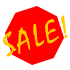
<style>
.page{position:relative;width:70px;height:70px;background:#ffffff}
.page>*{position:absolute;margin:0}
.t1{font:32px "Mistral";letter-spacing:0.075em;color:#ffcc00}
</style>
<div class="page">
<p class="t1" style="left:3px;top:15px;width:65px;height:42px;rotate:-17deg">SALE!</p>
</div>
